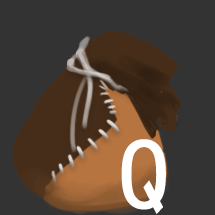
<style>
.page{position:relative;width:215px;height:215px;background:#333333}
.page>*{position:absolute;margin:0}
.t1{font:102.5px "KaiTi";letter-spacing:-0.06em;color:#ffffff}
</style>
<div class="page">
<p class="t1" style="left:121px;top:139px;width:45px;height:75px">Q</p>
</div>
